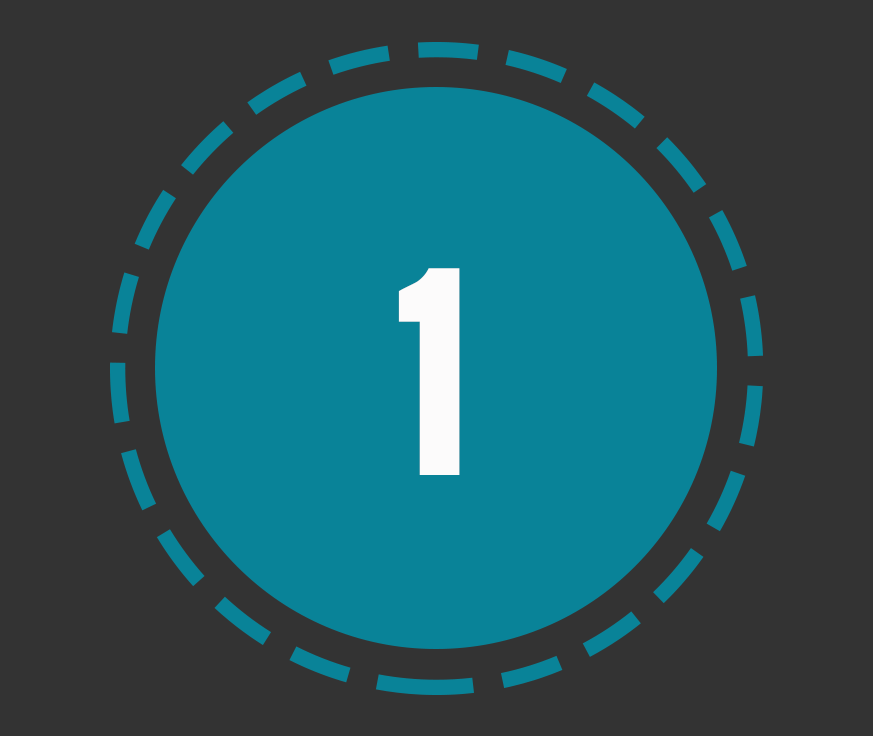
<style>
.page{position:relative;width:873px;height:736px;background:#333333}
.page>*{position:absolute;margin:0}
.t1{font:234.9px "Oswald-Bold";color:#fcfbfb}
</style>
<div class="page">
<p class="t1" style="left:398px;top:268px;width:62px;height:207px">1</p>
</div>
